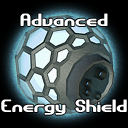
<style>
.page{position:relative;width:128px;height:128px}
.page>*{position:absolute;margin:0}
.t1{font:18px "GravitateBRK";color:#ffffff}
</style>
<div class="page">
<p class="t1" style="left:20px;top:13px;width:88px;height:13px">Advanced</p>
<p class="t1" style="left:1px;top:99px;width:126px;height:16px">Energy Shield</p>
</div>
